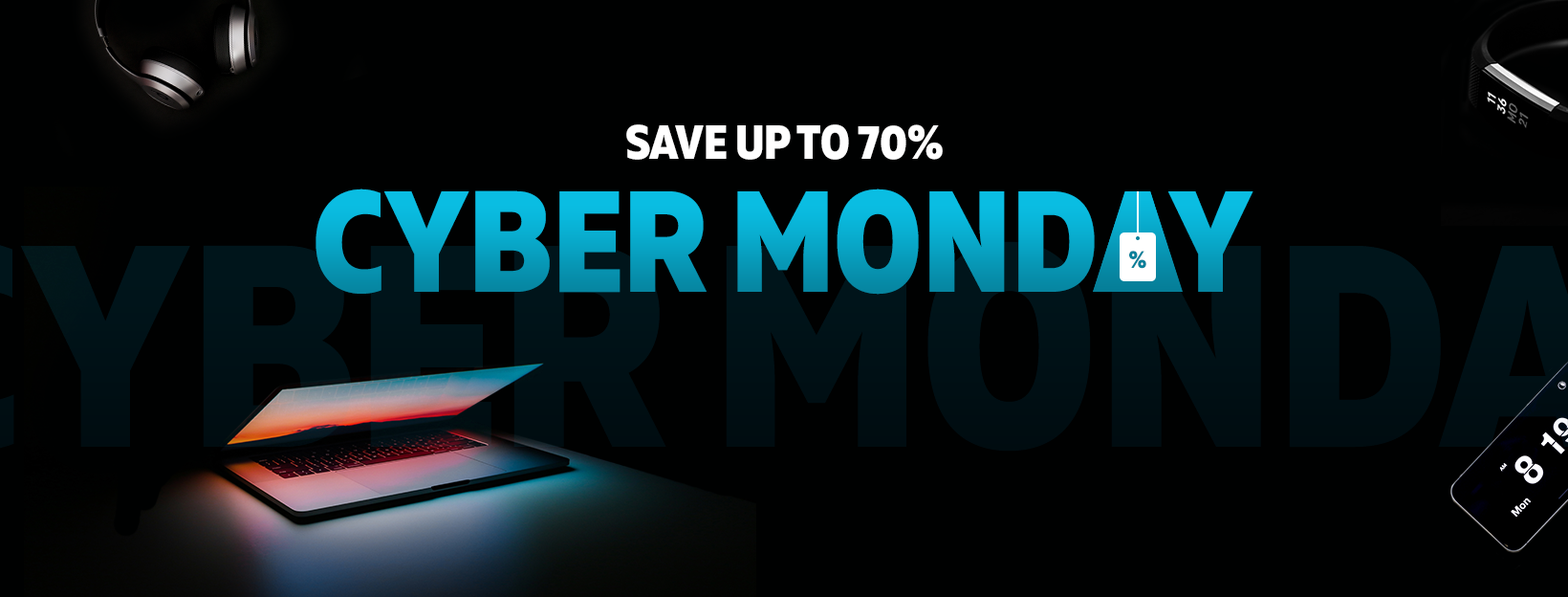
<style>
.page{position:relative;width:1568px;height:597px;background:#000101}
.page>*{position:absolute;margin:0}
.t1{font:47.8px "MullerNarrow-ExtraBold";color:#ffffff}
.t2{font:143.4px "MullerNarrow-ExtraBold"}
.t3{font:23.9px "MullerNarrow-ExtraBold";color:#06809a}
</style>
<div class="page">
<p class="t1" style="left:626px;top:124px;width:317px;height:36px">SAVE UP TO 70%</p>
<p class="t2" style="left:316px;top:188px;width:937px;height:106px">CYBER MONDAY</p>
<p class="t3" style="left:1129px;top:250px;width:17px;height:19px">%</p>
</div>
